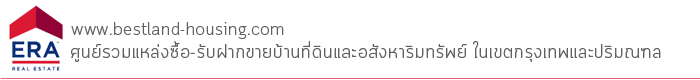
<style>
.page{position:relative;width:700px;height:80px;background:#ffffff}
.page>*{position:absolute;margin:0}
.t1{font:17.6px "Cloud-Light";letter-spacing:0.01em;color:#626262}
.t2{font:19.4px "Cloud-Light";letter-spacing:0.01em;color:#626262}
</style>
<div class="page">
<p class="t1" style="left:71px;top:22px;width:213px;height:17px">www.bestland-housing.com</p>
<p class="t2" style="left:71px;top:41px;width:590px;height:21px">ศูนย์รวมแหล่งซื้อ-รับฝากขายบ้านที่ดินและอสังหาริมทรัพย์ ในเขตกรุงเทพและปริมณฑล</p>
</div>
